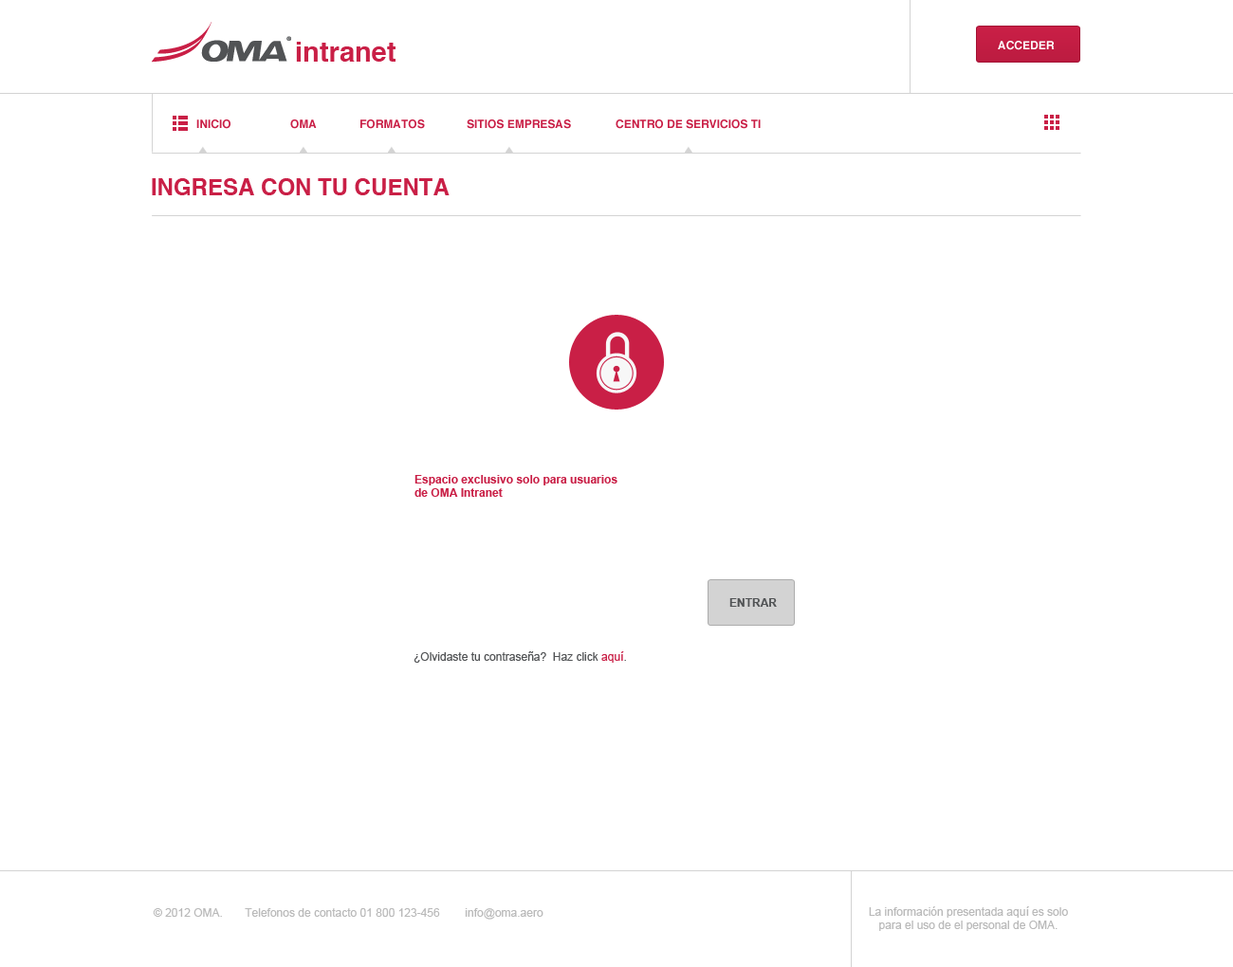
<style>
.page{position:relative;width:1233px;height:967px;background:#ffffff}
.page>*{position:absolute;margin:0}
.t1{font:27.6px "Helvetica-Bold";color:#c91f46}
.t2{font:11.4px "Helvetica-Bold";color:#ffffff;text-transform:uppercase}
.t3{font:11.4px "Helvetica-Bold";color:#c91f46}
.t4{font:11.4px "Helvetica-Bold";color:#c91f46;text-transform:uppercase}
.t5{font:22.8px "Helvetica-Bold";color:#c91f46;text-transform:uppercase}
.t6{font:11.4px "Arial-BoldMT";color:#c91f46}
.t7{font:11.4px "Arial-BoldMT";color:#515355}
.t8{font:11.4px "ArialMT";color:#515355}
.t9{font:11.4px "ArialMT";color:#c91f46}
.t10{font:11.4px "ArialMT";color:#b9b9b9}
</style>
<div class="page">
<p class="t1" style="left:296px;top:42px;width:99px;height:20px">intranet</p>
<p class="t2" style="left:998px;top:41px;width:57px;height:9px">Acceder</p>
<p class="t3" style="left:196px;top:119px;width:34px;height:10px">INICIO</p>
<p class="t3" style="left:290px;top:119px;width:27px;height:10px">OMA</p>
<p class="t4" style="left:360px;top:119px;width:65px;height:10px">formatos</p>
<p class="t4" style="left:467px;top:119px;width:104px;height:10px">sitios empresas</p>
<p class="t4" style="left:615px;top:119px;width:146px;height:10px">centro de servicios ti</p>
<p class="t5" style="left:152px;top:178px;width:297px;height:17px">ingresa con tu cuenta</p>
<p class="t6" style="left:414px;top:475px;width:203px;height:22px">Espacio exclusivo solo para usuarios <br>de OMA Intranet</p>
<p class="t7" style="left:729px;top:598px;width:48px;height:9px">ENTRAR</p>
<p class="t8" style="left:413px;top:651px;width:213px;height:12px">¿Olvidaste tu contraseña?  Haz click <span class="t9">aquí</span>.</p>
<p class="t10" style="left:153px;top:908px;width:390px;height:12px">© 2012 OMA.       Telefonos de contacto 01 800 123-456        info@oma.aero</p>
<p class="t10" style="left:869px;top:907px;width:199px;height:24px;text-align:center">La información presentada aquí es solo<br>para el uso de el personal de OMA.</p>
</div>
